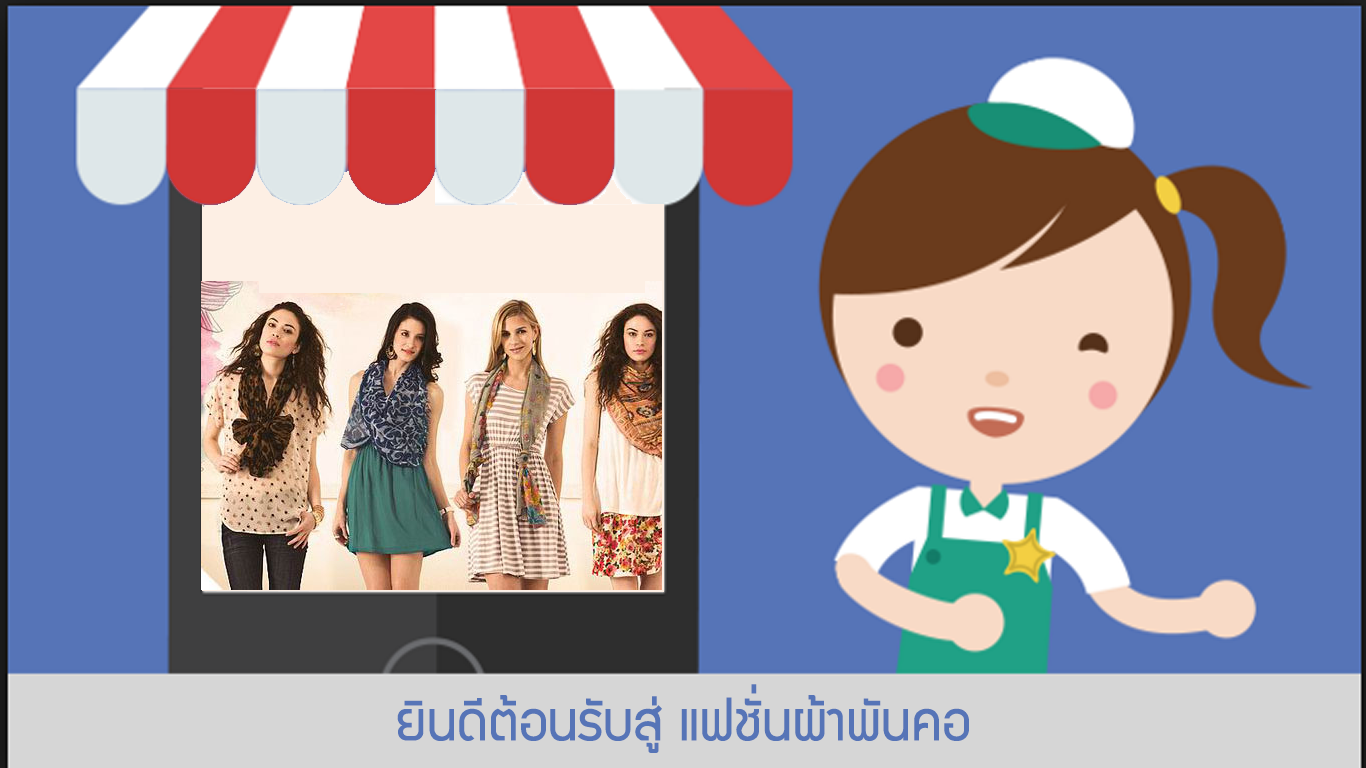
<style>
.page{position:relative;width:1366px;height:768px;background:#5674b7}
.page>*{position:absolute;margin:0}
.t1{font:60px "supermarket";color:#5674b7}
</style>
<div class="page">
<p class="t1" style="left:397px;top:684px;width:572px;height:69px">ยินดีต้อนรับสู่ แฟชั่นผ้าพันคอ</p>
</div>
